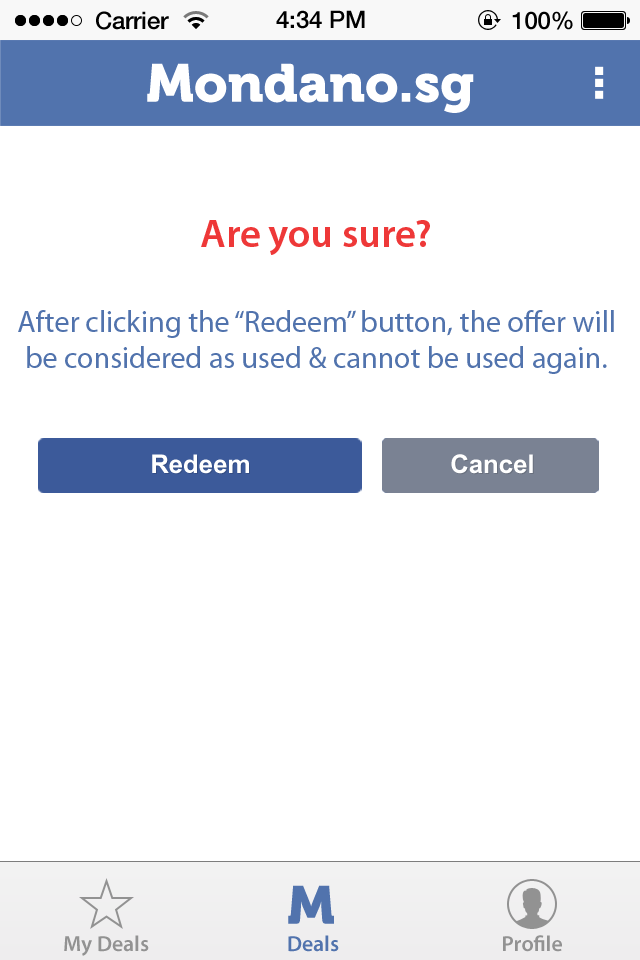
<style>
.page{position:relative;width:640px;height:960px;background:#ffffff}
.page>*{position:absolute;margin:0}
.t1{font:24px "HelveticaNeue-Medium";color:#000000}
.t2{font:53.3px "Museo900-Regular";color:#ffffff}
.t3{font:40px "MyriadPro-Semibold";color:#ee3838}
.t4{font:30px "MyriadPro-Regular";color:#5173ad}
.t5{font:36px "Utsaah-Bold";color:#ffffff}
.t6{font:53.3px "Museo900-Regular";color:#5173ad}
.t7{font:22px "MyriadPro-Semibold";color:#929292}
.t8{font:22px "MyriadPro-Semibold";color:#5173ad}
</style>
<div class="page">
<p class="t1" style="left:96px;top:11px;width:73px;height:19px">Carrier</p>
<p class="t1" style="left:276px;top:10px;width:89px;height:19px">4:34 PM</p>
<p class="t1" style="left:512px;top:11px;width:61px;height:19px">100%</p>
<p class="t2" style="left:147px;top:63px;width:327px;height:50px">Mondano.sg</p>
<p class="t3" style="left:201px;top:220px;width:229px;height:35px">Are you sure?</p>
<p class="t4" style="left:18px;top:310px;width:596px;height:64px;text-align:center">After clicking the “Redeem” button, the offer will be considered as used &amp; cannot be used again.</p>
<p class="t5" style="left:152px;top:454px;width:97px;height:20px">Redeem</p>
<p class="t5" style="left:451px;top:454px;width:82px;height:20px">Cancel</p>
<p class="t6" style="left:288px;top:885px;width:46px;height:39px">M</p>
<p class="t7" style="left:64px;top:935px;width:85px;height:21px">My Deals</p>
<p class="t8" style="left:288px;top:935px;width:51px;height:17px">Deals</p>
<p class="t7" style="left:503px;top:935px;width:59px;height:17px">Profile</p>
</div>
